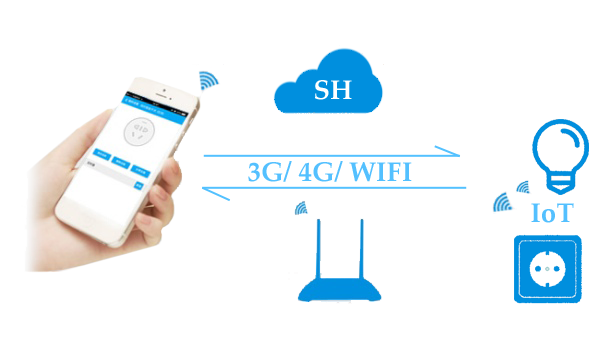
<style>
.page{position:relative;width:600px;height:340px;background:#ffffff}
.page>*{position:absolute;margin:0}
.t1{font:27px "PalatinoLinotype-Bold";color:#ffffff}
.t2{font:27px "PalatinoLinotype-Bold";color:#53c0ff}
</style>
<div class="page">
<p class="t1" style="left:315px;top:80px;width:37px;height:20px">SH</p>
<p class="t2" style="left:248px;top:161px;width:164px;height:21px">3G/ 4G/ WIFI</p>
<p class="t2" style="left:531px;top:203px;width:43px;height:20px">IoT</p>
</div>
